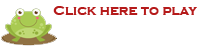
<style>
.page{position:relative;width:200px;height:50px;background:#ffffff}
.page>*{position:absolute;margin:0}
.t1{font:14px "CopperplateGothic-Bold";color:#b51a1a}
</style>
<div class="page">
<p class="t1" style="left:53px;top:6px;width:144px;height:9px">Click here to play</p>
</div>
